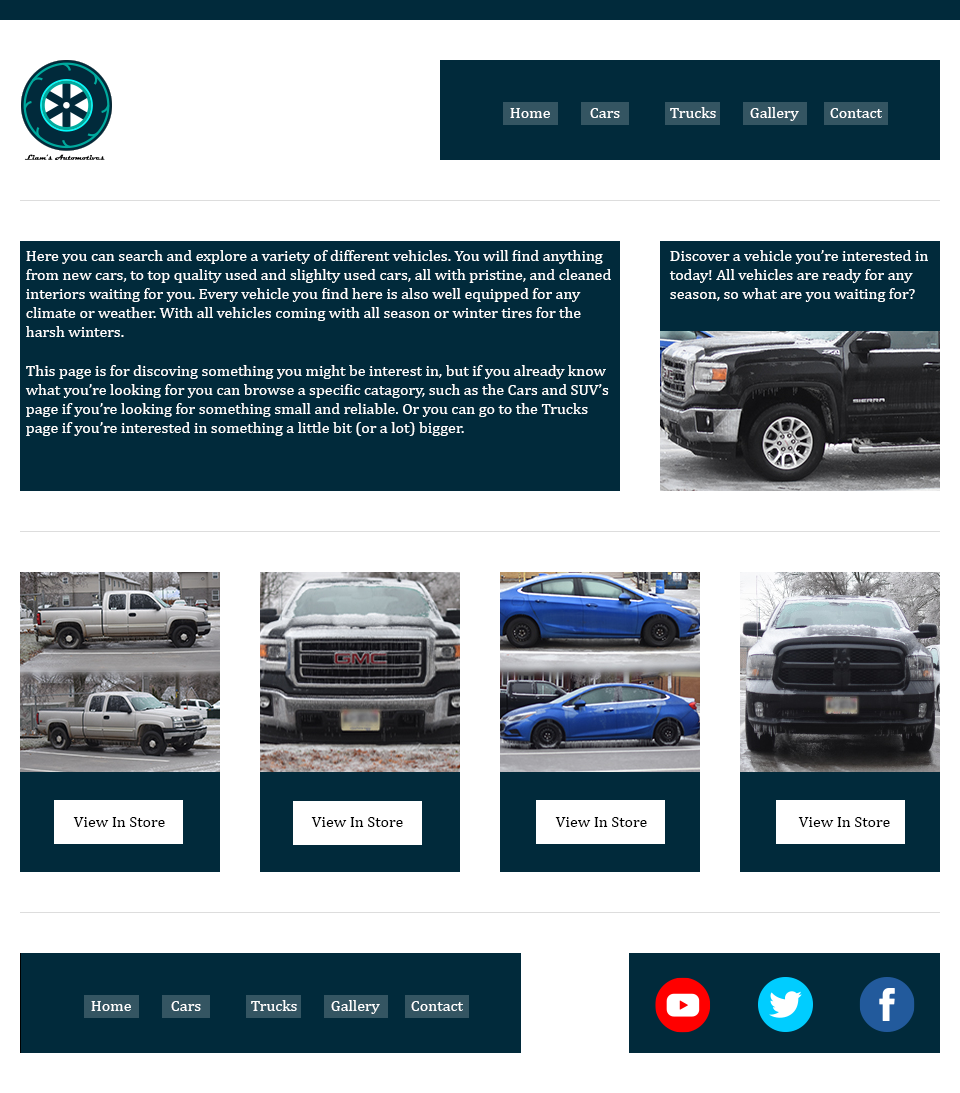
<style>
.page{position:relative;width:960px;height:1093px;background:#ffffff}
.page>*{position:absolute;margin:0}
.t1{font:16px "Cambria";color:#ffffff}
.t2{font:16px "Cambria";color:#000000}
</style>
<div class="page">
<p class="t1" style="left:510px;top:108px;width:40px;height:10px">Home</p>
<p class="t1" style="left:590px;top:108px;width:30px;height:10px">Cars</p>
<p class="t1" style="left:670px;top:107px;width:46px;height:11px">Trucks</p>
<p class="t1" style="left:750px;top:107px;width:49px;height:14px">Gallery</p>
<p class="t1" style="left:830px;top:108px;width:52px;height:10px">Contact</p>
<p class="t1" style="left:25px;top:250px;width:586px;height:186px">Here you can search and explore a variety of different vehicles. You will find anything<br>from new cars, to top quality used and slighlty used cars, all with pristine, and cleaned<br>interiors waiting for you. Every vehicle you find here is also well equipped for any<br>climate or weather. With all vehicles coming with all season or winter tires for the<br>harsh winters.<br><br>This page is for discoving something you might be interest in, but if you already know<br>what you’re looking for you can browse a specific catagory, such as the Cars and SUV’s<br>page if you’re looking for something small and reliable. Or you can go to the Trucks<br>page if you’re interested in something a little bit (or a lot) bigger.</p>
<p class="t1" style="left:669px;top:250px;width:259px;height:52px">Discover a vehicle you’re interested in<br>today! All vehicles are ready for any<br>season, so what are you waiting for?</p>
<p class="t2" style="left:73px;top:817px;width:92px;height:10px">View In Store</p>
<p class="t2" style="left:311px;top:817px;width:92px;height:10px">View In Store</p>
<p class="t2" style="left:555px;top:817px;width:92px;height:10px">View In Store</p>
<p class="t2" style="left:798px;top:817px;width:92px;height:10px">View In Store</p>
<p class="t1" style="left:91px;top:1001px;width:40px;height:10px">Home</p>
<p class="t1" style="left:171px;top:1001px;width:30px;height:10px">Cars</p>
<p class="t1" style="left:251px;top:1000px;width:46px;height:11px">Trucks</p>
<p class="t1" style="left:331px;top:1000px;width:49px;height:14px">Gallery</p>
<p class="t1" style="left:411px;top:1001px;width:52px;height:10px">Contact</p>
</div>
